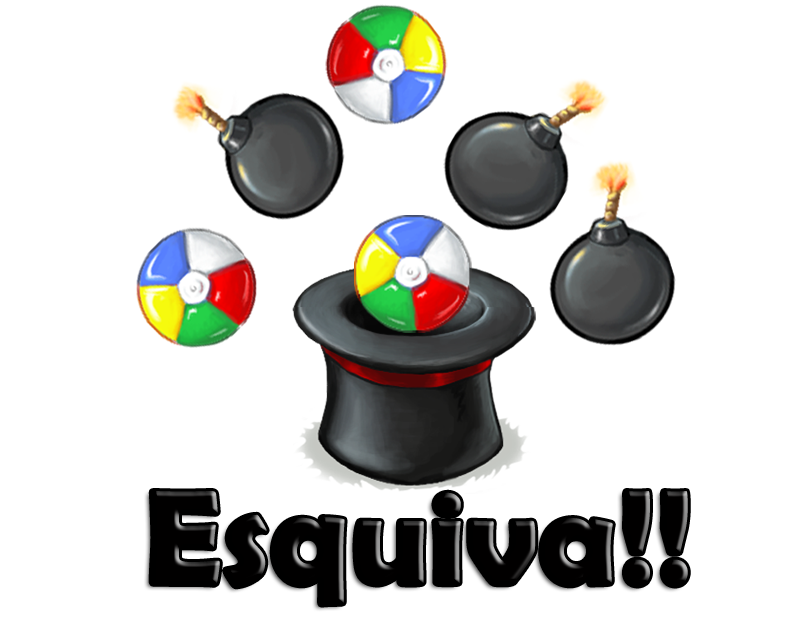
<style>
.page{position:relative;width:800px;height:640px;background:#ffffff}
.page>*{position:absolute;margin:0}
.t1{font:135px "BerlinSansFBDemi-Bold";color:#010000}
</style>
<div class="page">
<p class="t1" style="left:151px;top:491px;width:537px;height:114px">Esquiva!!</p>
</div>
